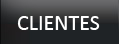
<style>
.page{position:relative;width:119px;height:44px;background:#1f2326}
.page>*{position:absolute;margin:0}
.t1{font:22px "Calibri";color:#ffffff}
</style>
<div class="page">
<p class="t1" style="left:17px;top:16px;width:83px;height:14px">CLIENTES</p>
</div>
